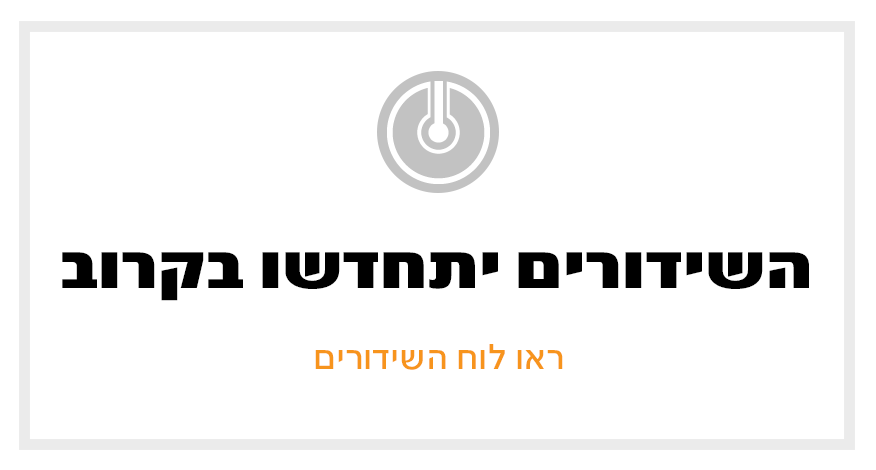
<style>
.page{position:relative;width:876px;height:470px;background:#ffffff}
.page>*{position:absolute;margin:0}
.t1{font:68px "NarkisTamBlackMF-Regular";color:#000000}
.t2{font:36px "NarkisTamMF-Medium";color:#f7941d}
</style>
<div class="page">
<p class="t1" style="left:62px;top:252px;width:747px;height:49px">השידורים יתחדשו בקרוב</p>
<p class="t2" style="left:315px;top:344px;width:248px;height:26px">ראו לוח השידורים</p>
</div>
